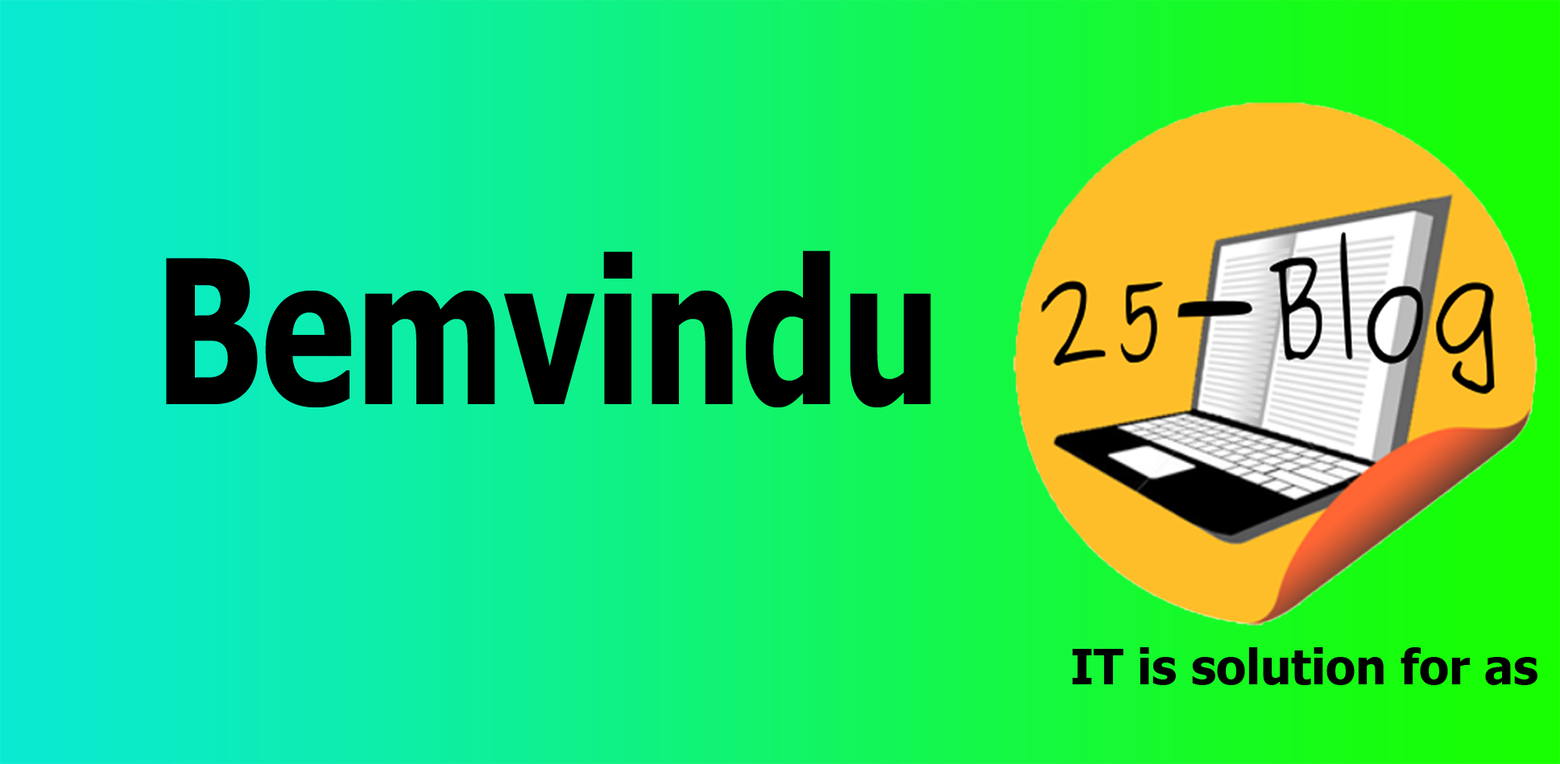
<style>
.page{position:relative;width:1560px;height:764px}
.page>*{position:absolute;margin:0}
.t1{font:200.6px "Tahoma-Bold";color:#000000;scale:0.78 1}
.t2{font:48.3px "Tahoma-Bold";color:#000000}
</style>
<div class="page">
<p class="t1" style="left:166px;top:250px;width:765px;height:158px">Bemvindu</p>
<p class="t2" style="left:1072px;top:648px;width:466px;height:37px">IT is solution for as</p>
</div>
